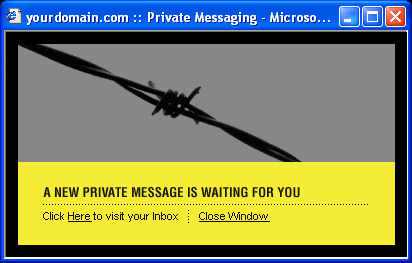
<style>
.page{position:relative;width:412px;height:263px;background:#868787}
.page>*{position:absolute;margin:0}
.t1{font:13px "Helvetica-Condensed-Bold";color:#171717}
.t2{font:11px "ArialMT";color:#0e0e0e}
.t3{font:11px "ArialMT";color:#0e0e0e;text-decoration:underline}
</style>
<div class="page">
<p class="t1" style="left:43px;top:187px;width:257px;height:11px">A NEW PRIVATE MESSAGE IS WAITING FOR YOU</p>
<p class="t2" style="left:43px;top:212px;width:135px;height:10px">Click <span class="t3">Here</span> to visit your Inbox</p>
<p class="t3" style="left:199px;top:212px;width:71px;height:10px">Close Window</p>
</div>
